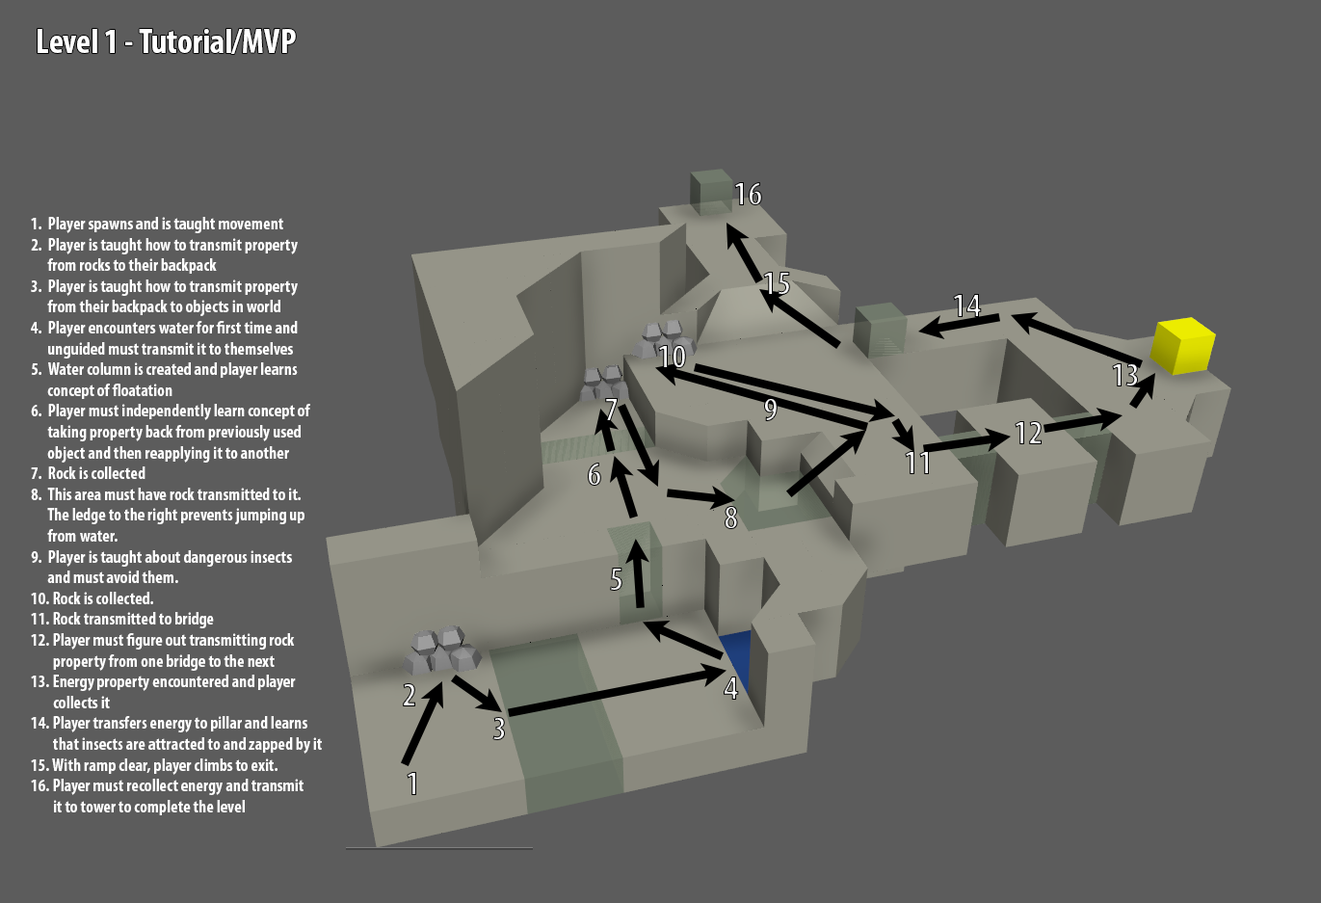
<style>
.page{position:relative;width:1321px;height:903px;background:#5c5c5c}
.page>*{position:absolute;margin:0}
.t1{font:34.7px "MyriadPro-BoldCond";color:#ffffff}
.t2{font:17.3px "MyriadPro-BoldCond";color:#ffffff}
</style>
<div class="page">
<p class="t1" style="left:38px;top:29px;width:258px;height:25px">Level 1 - Tutorial/MVP</p>
<p class="t2" style="left:31px;top:217px;width:291px;height:598px">1.  Player spawns and is taught movement<br>2.  Player is taught how to transmit property<br>      from rocks to their backpack<br>3.  Player is taught how to transmit property<br>      from their backpack to objects in world<br>4.  Player encounters water for first time and<br>      unguided must transmit it to themselves<br>5.  Water column is created and player learns<br>      concept of floatation<br>6.  Player must independently learn concept of<br>      taking property back from previously used <br>      object and then reapplying it to another<br>7.  Rock is collected<br>8.  This area must have rock transmitted to it.<br>      The ledge to the right prevents jumping up<br>      from water.<br>9.  Player is taught about dangerous insects<br>      and must avoid them.<br>10. Rock is collected.<br>11. Rock transmitted to bridge<br>12. Player must figure out transmitting rock<br>        property from one bridge to the next<br>13. Energy property encountered and player<br>        collects it<br>14. Player transfers energy to pillar and learns<br>        that insects are attracted to and zapped by it<br>15. With ramp clear, player climbs to exit.<br>16. Player must recollect energy and transmit<br>        it to tower to complete the level</p>
</div>
